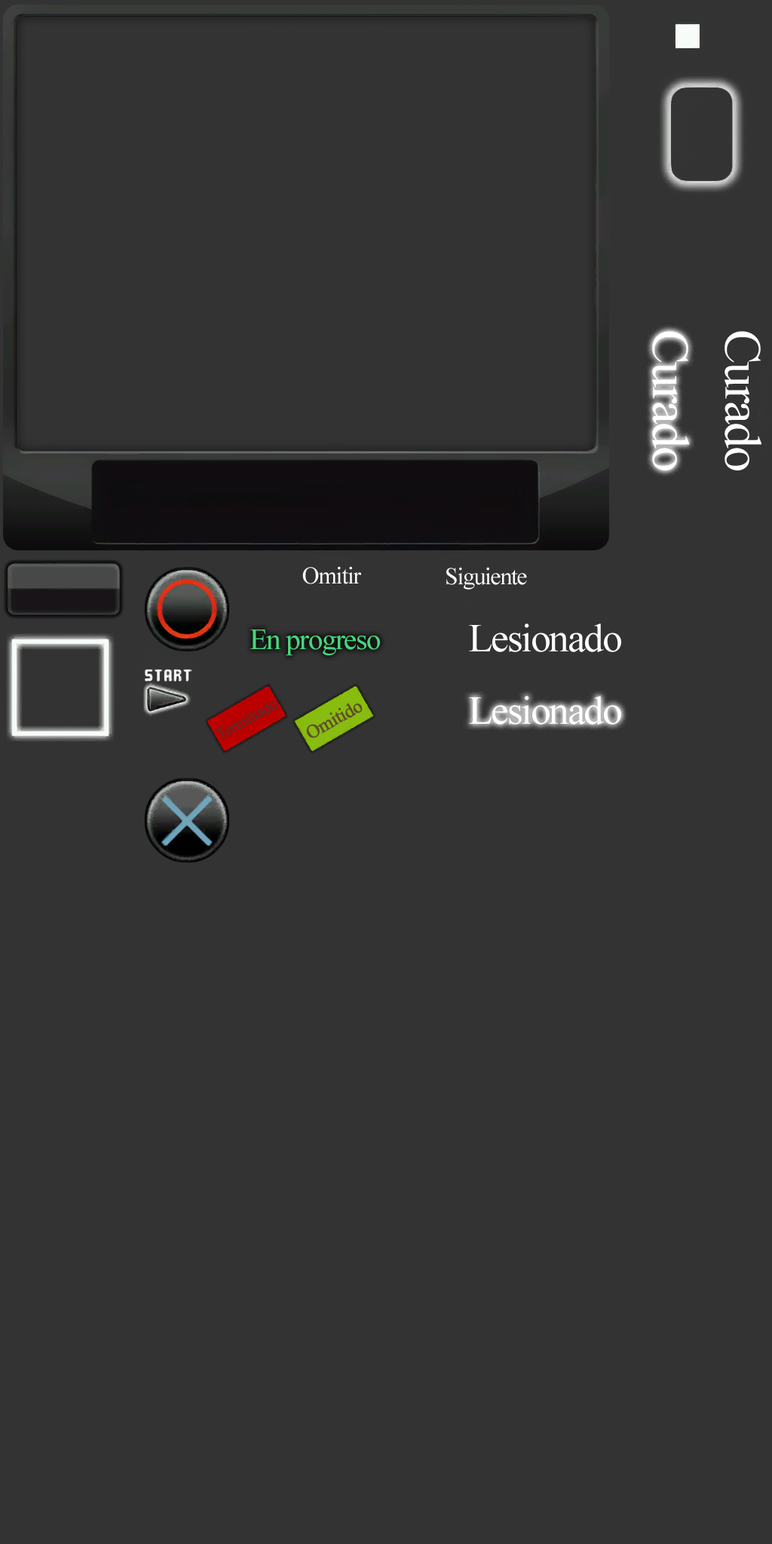
<style>
.page{position:relative;width:772px;height:1544px;background:#333333}
.page>*{position:absolute;margin:0}
.t1{font:51.9px "TimesNewRomanPSMT";letter-spacing:-0.04em;color:#ffffff}
.t2{font:24.1px "TimesNewRomanPSMT";letter-spacing:-0.04em;color:#ffffff}
.t3{font:29.4px "TimesNewRomanPSMT";letter-spacing:-0.04em;color:#48d67c}
.t4{font:40px "TimesNewRomanPSMT";letter-spacing:-0.04em;color:#ffffff}
.t5{font:15.9px "TimesNewRomanPSMT";letter-spacing:-0.04em;color:#562c2a;font-weight:bold}
.t6{font:18.9px "TimesNewRomanPSMT";letter-spacing:-0.04em;color:#605026;font-weight:bold}
</style>
<div class="page">
<p class="t1" style="left:652px;top:331px;width:37px;height:140px;rotate:90deg">Curado</p>
<p class="t1" style="left:725px;top:331px;width:37px;height:140px;rotate:90deg">Curado</p>
<p class="t2" style="left:302px;top:566px;width:59px;height:18px">Omitir</p>
<p class="t2" style="left:446px;top:567px;width:81px;height:23px">Siguiente</p>
<p class="t3" style="left:250px;top:630px;width:130px;height:26px">En progreso</p>
<p class="t4" style="left:469px;top:624px;width:152px;height:28px">Lesionado</p>
<p class="t5" style="left:214px;top:701px;width:63px;height:38px;rotate:-29deg;opacity:0.82">Terminado</p>
<p class="t4" style="left:469px;top:696px;width:152px;height:29px">Lesionado</p>
<p class="t6" style="left:306px;top:703px;width:57px;height:35px;rotate:-29deg">Omitido</p>
</div>
